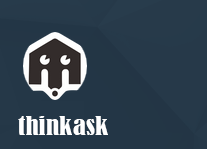
<style>
.page{position:relative;width:207px;height:149px}
.page>*{position:absolute;margin:0}
.t1{font:24px "BernardMT-Condensed";color:#ffffff;scale:1.14 1}
</style>
<div class="page">
<p class="t1" style="left:18px;top:116px;width:90px;height:19px">thinkask</p>
</div>
